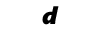
<style>
.page{position:relative;width:100px;height:30px;background:#ffffff}
.page>*{position:absolute;margin:0}
.t1{font:24px "SegoeUIBlack-Italic";color:#000000}
</style>
<div class="page">
<p class="t1" style="left:42px;top:6px;width:17px;height:19px">d</p>
</div>
